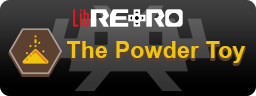
<style>
.page{position:relative;width:256px;height:96px}
.page>*{position:absolute;margin:0}
.t1{font:23px "Arial-BoldMT";letter-spacing:0.01em;color:#f1c40f}
</style>
<div class="page">
<p class="t1" style="left:67px;top:41px;width:178px;height:22px">The Powder Toy</p>
</div>
